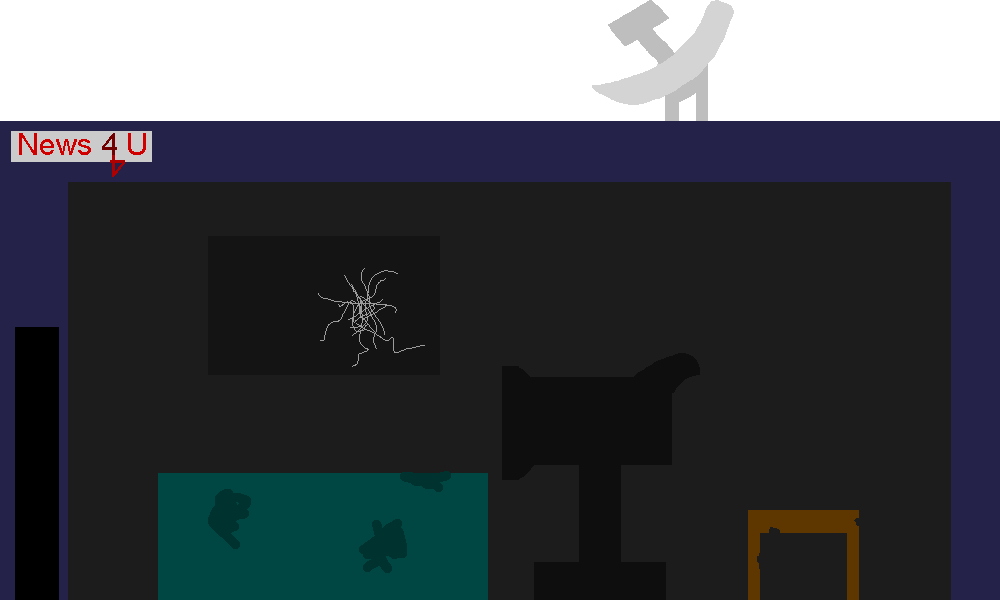
<style>
.page{position:relative;width:1000px;height:600px;background:#1c1c1c}
.page>*{position:absolute;margin:0}
.t1{font:30px "ArialMT";color:#d00000}
.t2{font:30px "ArialMT";color:#730000}
.t3{font:30px "ArialMT";color:#ae0000}
</style>
<div class="page">
<p class="t1" style="left:19px;top:133px;width:127px;height:22px">News <span class="t2">4</span> U</p>
<p class="t3" style="left:110px;top:155px;width:15px;height:22px;rotate:-180deg">4</p>
</div>
